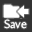
<style>
.page{position:relative;width:32px;height:32px;background:#333333}
.page>*{position:absolute;margin:0}
.t1{font:12px "Amira-Roman";color:#ffffff}
</style>
<div class="page">
<p class="t1" style="left:4px;top:19px;width:23px;height:10px">Save</p>
</div>
